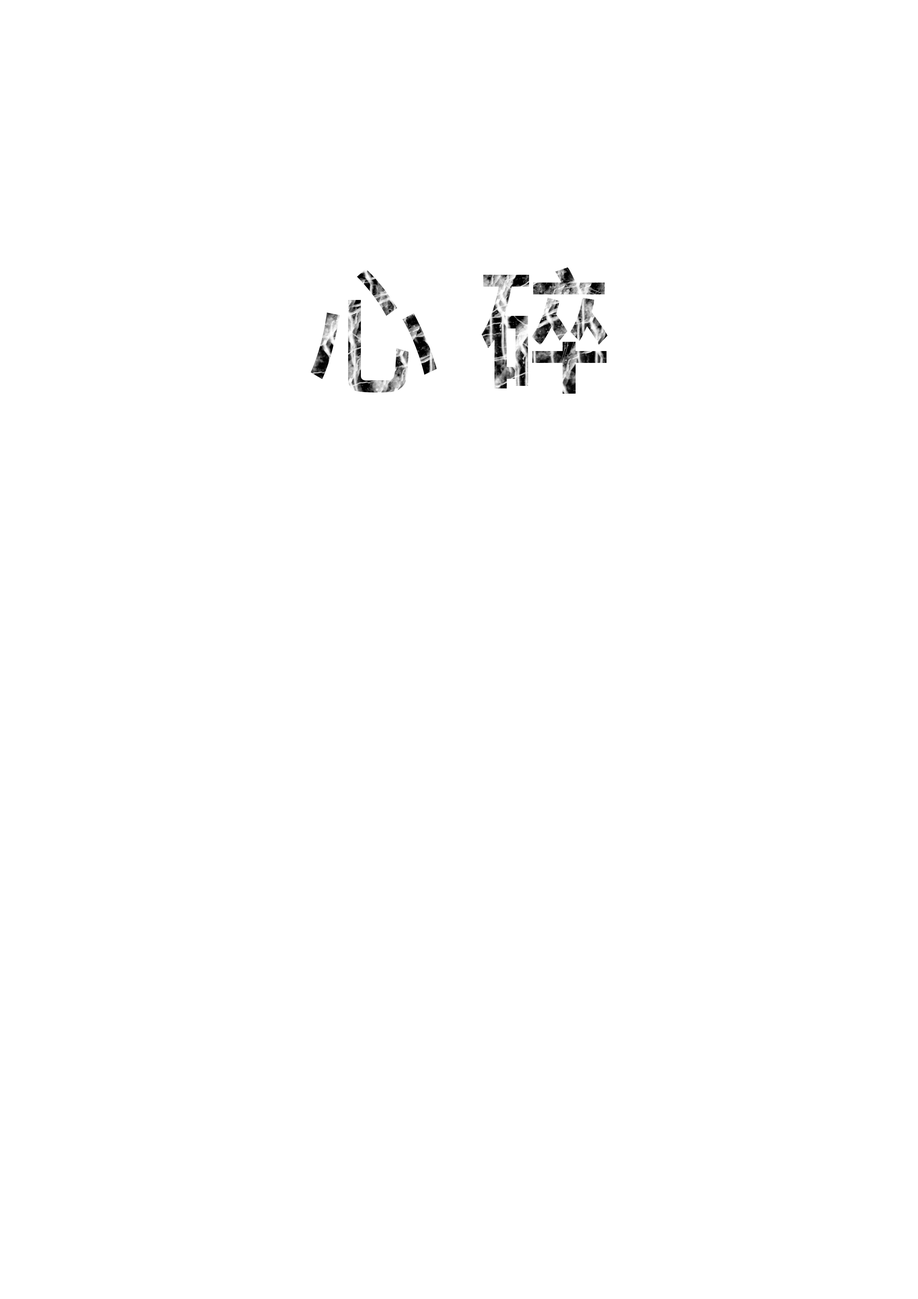
<style>
.page{position:relative;width:918px;height:1299px;background:#ffffff}
.page>*{position:absolute;margin:0}
.t1{font:142.3px "MicrosoftJhengHeiBold";letter-spacing:0.2em}
</style>
<div class="page">
<p class="t1" style="left:311px;top:267px;width:297px;height:127px">心碎</p>
</div>
